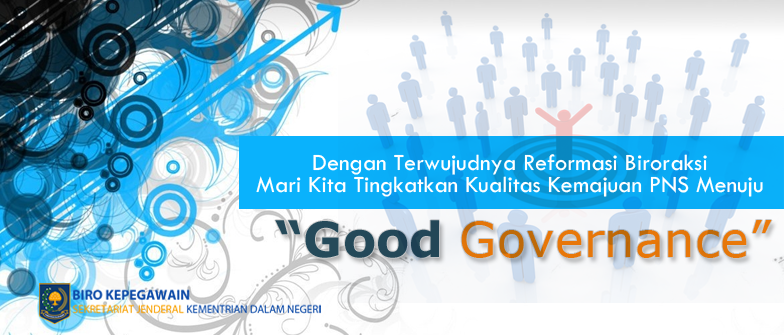
<style>
.page{position:relative;width:784px;height:335px}
.page>*{position:absolute;margin:0}
.t1{font:24.2px/21.9px "TwCenMT-Regular";color:#ffffff}
.t2{font:48.4px "Verdana";color:#f07b09}
.t3{font:48.4px "Verdana-Bold";color:#254a5a}
</style>
<div class="page">
<p class="t1" style="left:256px;top:154px;width:507px;height:43px;text-align:center">Dengan Terwujudnya Reformasi Biroraksi<br>Mari Kita Tingkatkan Kualitas Kemajuan PNS Menuju</p>
<p class="t2" style="left:275px;top:220px;width:497px;height:38px"><span class="t3">“Good </span>Governance”</p>
</div>
